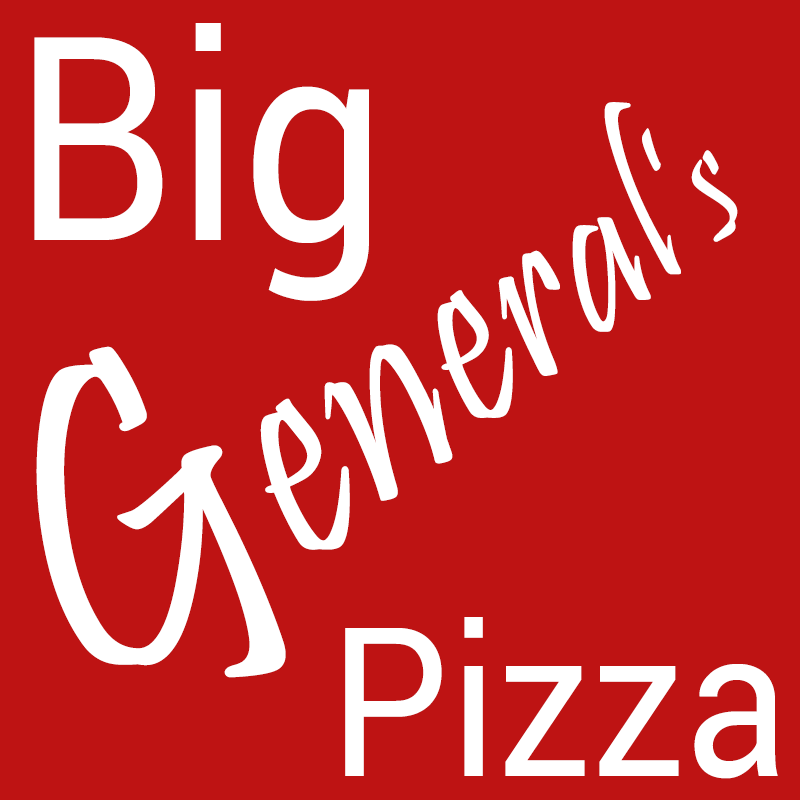
<style>
.page{position:relative;width:800px;height:800px;background:#be1313}
.page>*{position:absolute;margin:0}
.t1{font:285.1px "Roboto-Regular";color:#ffffff;scale:0.9 1}
.t2{font:189px "Pristina-Regular";color:#ffffff;scale:0.9 1}
.t3{font:459px "Pristina-Regular";color:#ffffff;scale:0.9 1}
.t4{font:351px "Pristina-Regular";color:#ffffff;scale:0.9 1}
.t5{font:324px "Pristina-Regular";color:#ffffff;scale:0.9 1}
.t6{font:297px "Pristina-Regular";color:#ffffff;scale:0.9 1}
.t7{font:270px "Pristina-Regular";color:#ffffff;scale:0.9 1}
.t8{font:243px "Pristina-Regular";color:#ffffff;scale:0.9 1}
.t9{font:216px "Pristina-Regular";color:#ffffff;scale:0.9 1}
.t10{font:208.3px "Roboto-Regular";color:#ffffff;scale:0.9 1}
</style>
<div class="page">
<p class="t1" style="left:34px;top:23px;width:335px;height:278px">Big</p>
<p class="t2" style="left:36px;top:102px;width:702px;height:576px;rotate:-38deg"><span class="t3">G</span><span class="t4">e</span><span class="t5">n</span><span class="t6">e</span><span class="t7">r</span><span class="t8">a</span><span class="t9">l</span>’s</p>
<p class="t10" style="left:345px;top:617px;width:433px;height:162px">Pizza</p>
</div>
